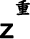
<style>
.page{position:relative;width:30px;height:39px;background:#ffffff}
.page>*{position:absolute;margin:0}
.t1{font:18px "DFKaiShu-SB-Estd-BF";color:#000000;font-weight:bold}
.t2{font:27px "ArialMT";color:#000000;font-weight:bold}
</style>
<div class="page">
<p class="t1" style="left:15px;top:0px;width:16px;height:16px">重</p>
<p class="t2" style="left:0px;top:23px;width:14px;height:16px">z</p>
</div>
